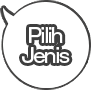
<style>
.page{position:relative;width:91px;height:90px;background:#ffffff}
.page>*{position:absolute;margin:0}
.t1{font:19px/20px "GothicMB101Pro-Medium";letter-spacing:-0.08em;color:#ffffff;scale:0.95 1}
</style>
<div class="page">
<p class="t1" style="left:22px;top:27px;width:48px;height:36px;text-align:center">Pilih<br>Jenis</p>
</div>
